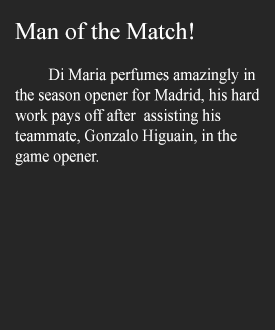
<style>
.page{position:relative;width:275px;height:330px;background:#262626}
.page>*{position:absolute;margin:0}
.t1{font:24px "TimesNewRomanPSMT";color:#ffffff}
.t2{font:17px "TimesNewRomanPSMT";color:#ffffff;scale:0.93 1}
</style>
<div class="page">
<p class="t1" style="left:15px;top:22px;width:178px;height:18px">Man of the Match!</p>
<p class="t2" style="left:15px;top:68px;width:245px;height:98px">Di Maria perfumes amazingly in <br>the season opener for Madrid, his hard <br>work pays off after  assisting his <br>teammate, Gonzalo Higuain, in the <br>game opener.</p>
</div>
